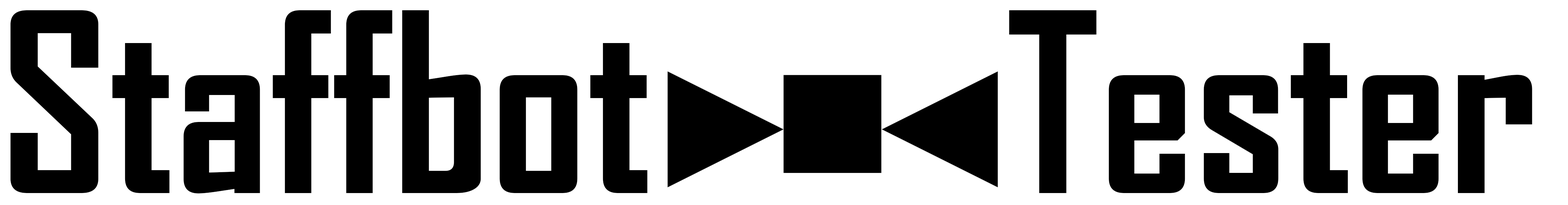
<style>
.page{position:relative;width:1568px;height:205px;background:#ffffff}
.page>*{position:absolute;margin:0}
.t1{font:238.6px "AgencyFB-Bold";color:#000000}
</style>
<div class="page">
<p class="t1" style="left:10px;top:10px;width:638px;height:183px">Staffbot</p>
<p class="t1" style="left:1009px;top:10px;width:523px;height:183px">Tester</p>
</div>
